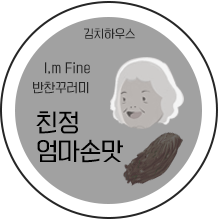
<style>
.page{position:relative;width:220px;height:220px;background:#a1a1a1}
.page>*{position:absolute;margin:0}
.t1{font:11px "KoreanYNSJG3-R";color:#262626}
.t2{font:12px/19.8px "KoreanYNSJG3-R";color:#262626}
.t3{font:23px/28.6px "KoreanYNSJG3-R";color:#000000}
</style>
<div class="page">
<p class="t1" style="left:84px;top:28px;width:51px;height:11px">김치하우스</p>
<p class="t2" style="left:33px;top:62px;width:57px;height:32px">I,m Fine<br>반찬꾸러미</p>
<p class="t3" style="left:36px;top:111px;width:87px;height:52px">친정<br>엄마손맛</p>
</div>
